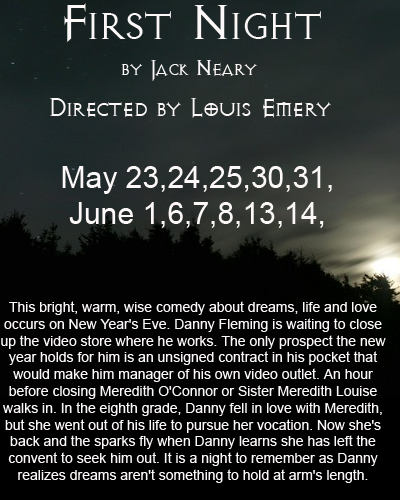
<style>
.page{position:relative;width:400px;height:500px}
.page>*{position:absolute;margin:0}
.t1{font:30px "AvalonQuestSWFTE";color:#fcf8f8}
.t2{font:72px "AvalonQuestSWFTE";color:#fcf8f8}
.t3{font:36px "AvalonQuestSWFTE";color:#fcf8f8}
.t4{font:30px "ArialMT";color:#fcf8f8}
.t5{font:14px "ArialMT";color:#fcf8f8}
</style>
<div class="page">
<p class="t1" style="left:64px;top:3px;width:257px;height:78px;text-align:center"><span class="t2">First Night<br></span>by Jack Neary</p>
<p class="t3" style="left:50px;top:98px;width:281px;height:20px">Directed by Louis Emery</p>
<p class="t4" style="left:62px;top:166px;width:270px;height:62px;text-align:center">May 23,24,25,30,31, <br>June 1,6,7,8,13,14,</p>
<p class="t5" style="left:1px;top:301px;width:385px;height:182px;text-align:center">This bright, warm, wise comedy about dreams, life and love occurs on New Year's Eve. Danny Fleming is waiting to close up the video store where he works. The only prospect the new year holds for him is an unsigned contract in his pocket that would make him manager of his own video outlet. An hour before closing Meredith O'Connor or Sister Meredith Louise walks in. In the eighth grade, Danny fell in love with Meredith, but she went out of his life to pursue her vocation. Now she's back and the sparks fly when Danny learns she has left the convent to seek him out. It is a night to remember as Danny realizes dreams aren't something to hold at arm's length.</p>
</div>
